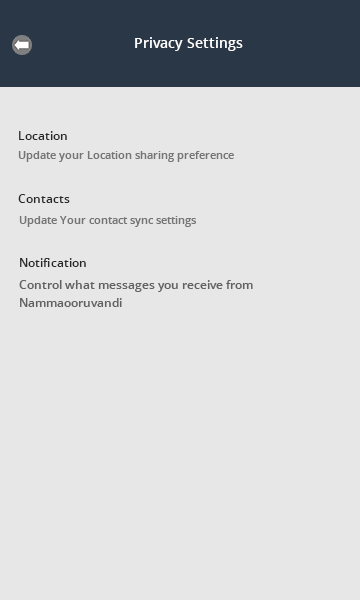
<style>
.page{position:relative;width:360px;height:600px;background:#e7e7e7}
.page>*{position:absolute;margin:0}
.t1{font:14px "OpenSans-Semibold";color:#fffefe}
.t2{font:12px "OpenSans-Semibold";color:#282828}
.t3{font:11px "OpenSans-Semibold";color:#757575}
</style>
<div class="page">
<p class="t1" style="left:135px;top:37px;width:108px;height:14px">Privacy Settings</p>
<p class="t2" style="left:19px;top:131px;width:48px;height:9px">Location</p>
<p class="t3" style="left:18px;top:151px;width:216px;height:11px">Update your Location sharing preference</p>
<p class="t2" style="left:18px;top:194px;width:52px;height:9px">Contacts</p>
<p class="t3" style="left:19px;top:216px;width:177px;height:11px">Update Your contact sync settings</p>
<p class="t2" style="left:20px;top:258px;width:66px;height:9px">Notification</p>
</div>
